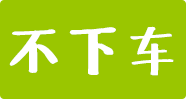
<style>
.page{position:relative;width:186px;height:99px;background:#9ac600}
.page>*{position:absolute;margin:0}
.t1{font:47.6px "SentyCHALKoriginal";color:#ffffff;font-weight:bold}
</style>
<div class="page">
<p class="t1" style="left:9px;top:26px;width:165px;height:50px">不下车</p>
</div>
